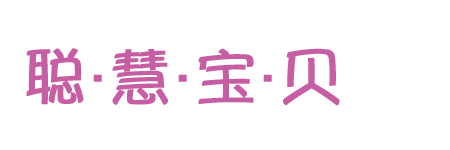
<style>
.page{position:relative;width:450px;height:150px;background:#ffffff}
.page>*{position:absolute;margin:0}
.t1{font:64px "YuppySC-Regular";color:#c75ea3;font-weight:bold}
</style>
<div class="page">
<p class="t1" style="left:26px;top:48px;width:314px;height:58px">聪·慧·宝·贝</p>
</div>
